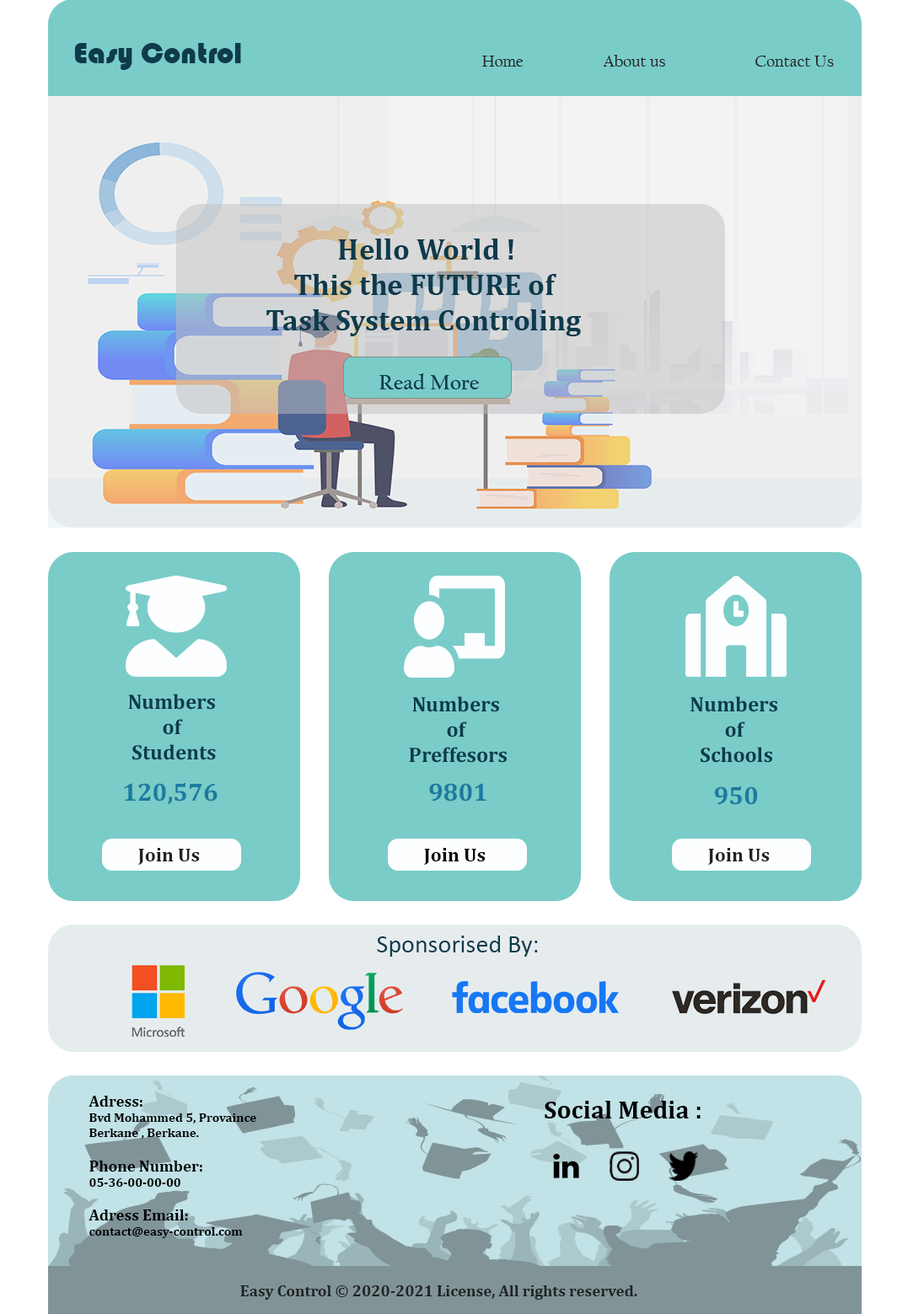
<style>
.page{position:relative;width:908px;height:1314px;background:#7accc8}
.page>*{position:absolute;margin:0}
.t1{font:30.3px "Bauhaus93";color:#0d3b4c}
.t2{font:16.9px "CalifornianFB-Reg";color:#222222}
.t3{font:29.5px "Cambria-Bold";color:#0d3b4c}
.t4{font:21.1px "CalifornianFB-Bold";color:#0d3b4c}
.t5{font:21.1px "Cambria-Bold";color:#0d3b4c}
.t6{font:25.3px "Cambria-Bold";color:#1b7a9f}
.t7{font:19.4px "Cambria-Bold";color:#222222}
.t8{font:19.4px "Cambria-Bold";color:#000000}
.t9{font:25.3px "Calibri";color:#0d3b4c}
.t10{font:12.6px "Cambria-Bold";color:#000000}
.t11{font:15.9px "Cambria-Bold";color:#000000}
.t12{font:25.3px "Cambria-Bold";color:#000000}
.t13{font:15.9px "Cambria-Bold";color:#222222}
</style>
<div class="page">
<p class="t1" style="left:74px;top:43px;width:167px;height:27px">Easy Control</p>
<p class="t2" style="left:482px;top:55px;width:351px;height:12px">Home   About us   Contact Us</p>
<p class="t3" style="left:266px;top:238px;width:315px;height:98px;text-align:center">Hello World !<br>This the FUTURE of <br>Task System Controling</p>
<p class="t4" style="left:379px;top:373px;width:100px;height:16px">Read More</p>
<p class="t5" style="left:128px;top:694px;width:88px;height:66px;text-align:center">Numbers <br>of <br>Students</p>
<p class="t5" style="left:409px;top:696px;width:97px;height:67px;text-align:center">Numbers <br>of <br>Preffesors</p>
<p class="t5" style="left:690px;top:696px;width:87px;height:67px;text-align:center">Numbers <br>of <br>Schools</p>
<p class="t6" style="left:124px;top:783px;width:93px;height:22px">120,576</p>
<p class="t6" style="left:429px;top:783px;width:57px;height:18px">9801</p>
<p class="t6" style="left:714px;top:786px;width:43px;height:19px">950</p>
<p class="t7" style="left:138px;top:848px;width:62px;height:17px">Join Us</p>
<p class="t8" style="left:424px;top:848px;width:61px;height:17px">Join Us</p>
<p class="t7" style="left:708px;top:848px;width:61px;height:17px">Join Us</p>
<p class="t9" style="left:377px;top:935px;width:161px;height:21px">Sponsorised By:</p>
<p class="t10" style="left:88px;top:1096px;width:168px;height:142px"><span class="t11">Adress:<br></span>Bvd Mohammed 5, Provaince Berkane , Berkane.<br><br><span class="t11">Phone Number:<br></span>05-36-00-00-00<br><br><span class="t11">Adress Email:<br></span>contact@easy-control.com</p>
<p class="t12" style="left:544px;top:1101px;width:156px;height:17px">Social Media :</p>
<p class="t13" style="left:240px;top:1285px;width:397px;height:14px">Easy Control © 2020-2021 License, All rights reserved.</p>
</div>
